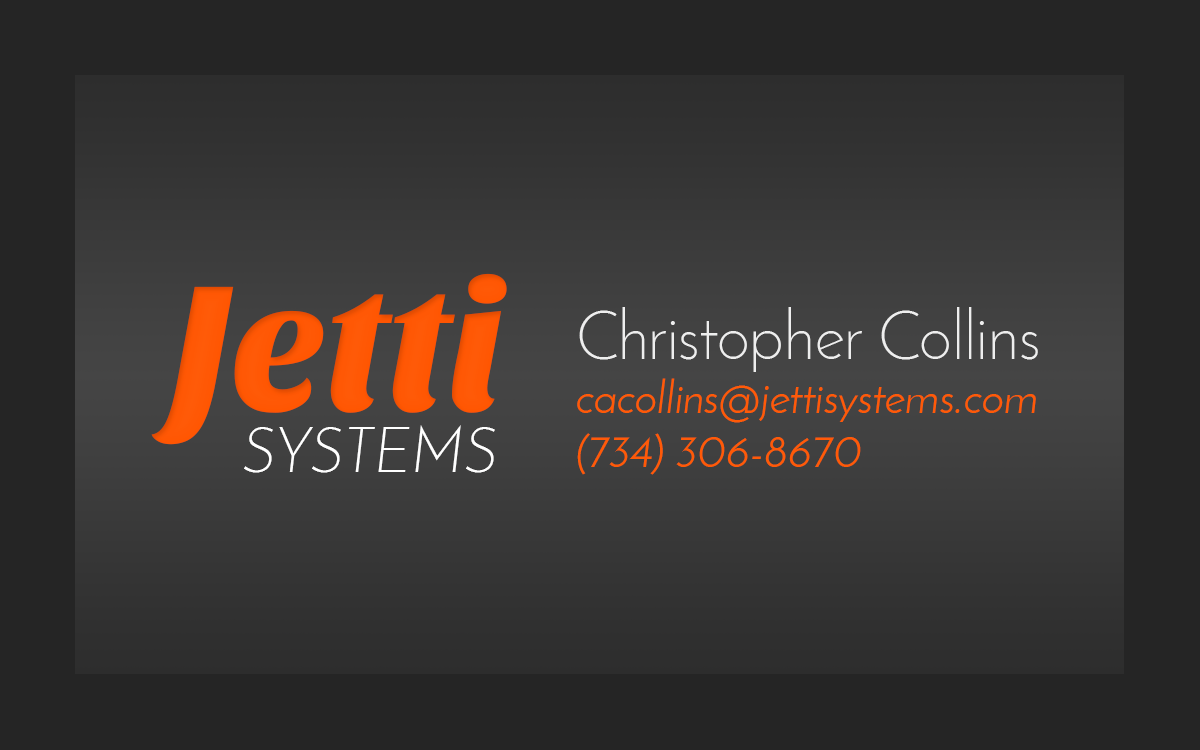
<style>
.page{position:relative;width:1200px;height:750px;background:#252525}
.page>*{position:absolute;margin:0}
.t1{font:185.5px "SansitaOne";letter-spacing:-0.01em;color:#ff5400;scale:0.95 1}
.t2{font:44.7px "JosefinSans";color:#ff5a07}
.t3{font:67.1px "JosefinSans-Light";color:#eeeeee}
.t4{font:62.6px "JosefinSans-LightItalic";letter-spacing:0.01em;color:#ffffff;text-transform:uppercase;scale:0.95 1}
</style>
<div class="page">
<p class="t1" style="left:151px;top:273px;width:356px;height:172px">Jetti</p>
<p class="t2" style="left:577px;top:307px;width:461px;height:168px"><span class="t3">Christopher Collins<br></span>cacollins@jettisystems.com<br>(734) 306-8670</p>
<p class="t4" style="left:244px;top:425px;width:251px;height:48px">systems</p>
</div>
